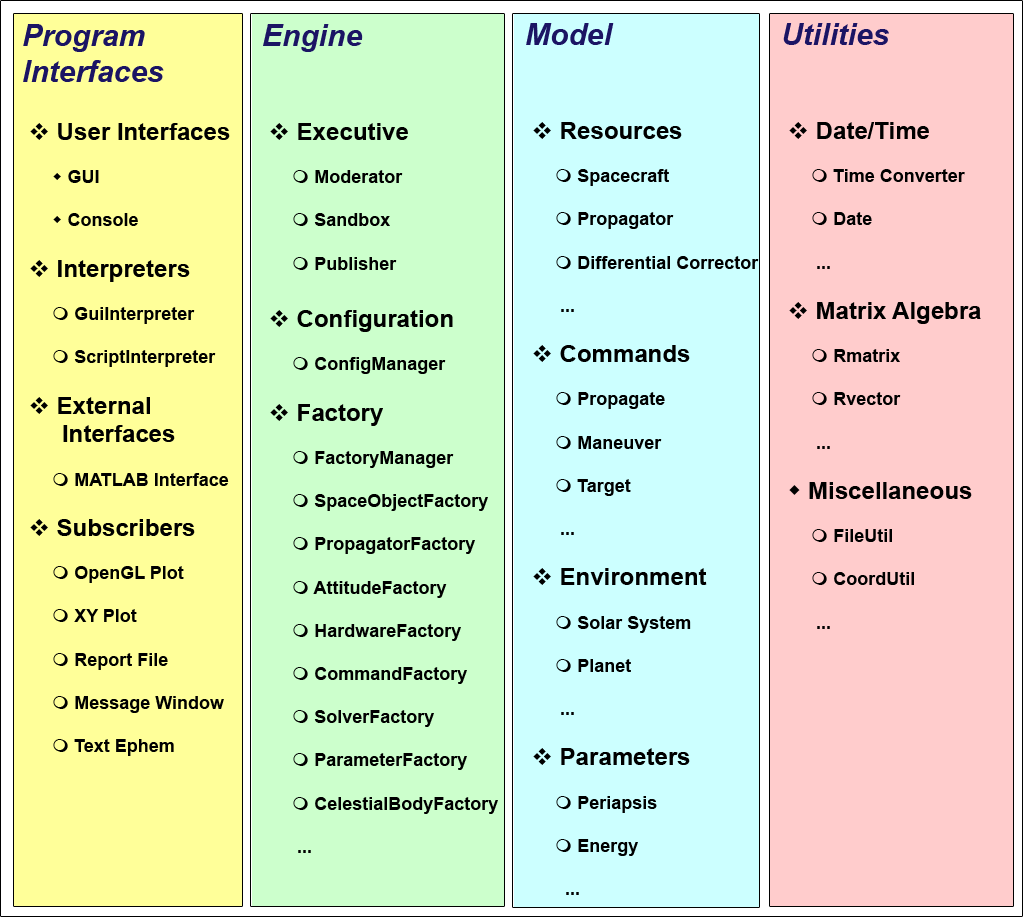
<style>
.page{position:relative;width:1024px;height:918px;background:#ffcccc}
.page>*{position:absolute;margin:0}
.t1{font:24px "Arial-BoldMT";color:#000000}
.t2{font:30px "Arial-BoldItalicMT";color:#1b1464}
.t3{font:24px "Wingdings-Regular";color:#000000}
.t4{font:18px "Wingdings-Regular";color:#000000}
.t5{font:18px "Arial-BoldMT";color:#000000}
</style>
<div class="page">
<p class="t1" style="left:23px;top:24px;width:207px;height:732px"><span class="t2">Program Interfaces<br><br> </span><span class="t3">v </span>User Interfaces<br><br>      <span class="t4">w</span><span class="t5"> GUI<br><br>      </span><span class="t4">w</span><span class="t5"> Console<br><br> </span><span class="t3">v </span>Interpreters<br><br>      <span class="t4">m</span><span class="t5"> GuiInterpreter<br><br>      </span><span class="t4">m</span><span class="t5"> ScriptInterpreter<br><br> </span><span class="t3">v </span>External<br>      Interfaces<br><br>      <span class="t4">m</span><span class="t5"> MATLAB Interface<br><br> </span><span class="t3">v </span>Subscribers<br><br>      <span class="t4">m</span><span class="t5"> OpenGL Plot<br><br>      </span><span class="t4">m</span><span class="t5"> XY Plot<br><br>      </span><span class="t4">m</span><span class="t5"> Report File<br><br>      </span><span class="t4">m</span><span class="t5"> Message Window<br><br>      </span><span class="t4">m</span><span class="t5"> Text Ephem</span></p>
<p class="t5" style="left:263px;top:24px;width:235px;height:829px"><span class="t2">Engine<br><br><br> </span><span class="t3">v </span><span class="t1">Executive<br><br>      </span><span class="t4">m</span> Moderator<br><br>      <span class="t4">m</span> Sandbox<br><br>      <span class="t4">m</span> Publisher<br><br> <span class="t3">v </span><span class="t1">Configuration<br><br>      </span><span class="t4">m</span> ConfigManager<br><br> <span class="t3">v </span><span class="t1">Factory<br><br>      </span><span class="t4">m</span> FactoryManager<br><br>      <span class="t4">m</span> SpaceObjectFactory<br><br>      <span class="t4">m</span> PropagatorFactory<br><br>      <span class="t4">m</span> AttitudeFactory<br><br>      <span class="t4">m</span> HardwareFactory<br><br>      <span class="t4">m</span> CommandFactory<br><br>      <span class="t4">m</span> SolverFactory<br><br>      <span class="t4">m</span> ParameterFactory<br><br>      <span class="t4">m</span> CelestialBodyFactory<br><br>       ...</p>
<p class="t5" style="left:526px;top:23px;width:233px;height:872px"><span class="t2">Model<br><br><br> </span><span class="t3">v </span><span class="t1">Resources<br><br>      </span><span class="t4">m</span> Spacecraft<br><br>      <span class="t4">m</span> Propagator<br><br>      <span class="t4">m</span> Differential Corrector<br><br>       ...<br><br> <span class="t3">v </span><span class="t1">Commands<br><br>      </span><span class="t4">m</span> Propagate<br><br>      <span class="t4">m</span> Maneuver<br><br>      <span class="t4">m</span> Target<br><br>       ...<br><br> <span class="t3">v </span><span class="t1">Environment<br><br>      </span><span class="t4">m</span> Solar System<br><br>      <span class="t4">m</span> Planet<br><br>       ...<br><br> <span class="t3">v </span><span class="t1">Parameters<br><br>      </span><span class="t4">m</span> Periapsis<br><br>      <span class="t4">m</span> Energy<br><br>        ...</p>
<p class="t5" style="left:783px;top:23px;width:198px;height:606px"><span class="t2">Utilities<br><br><br> </span><span class="t3">v </span><span class="t1">Date/Time<br><br>      </span><span class="t4">m </span>Time Converter<br><br>      <span class="t4">m </span>Date<br><br>       ...<br>        <br> <span class="t3">v </span><span class="t1">Matrix Algebra<br><br>      </span><span class="t4">m </span>Rmatrix<br><br>      <span class="t4">m </span>Rvector<br><br>       ...<br><br> <span class="t3">w </span><span class="t1">Miscellaneous<br><br>      </span><span class="t4">m </span>FileUtil<br><br>      <span class="t4">m </span>CoordUtil<br><br>       ...</p>
</div>
